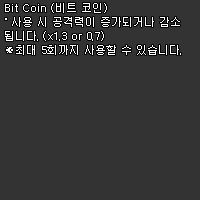
<style>
.page{position:relative;width:200px;height:200px;background:#333333}
.page>*{position:absolute;margin:0}
.t1{font:11px/14px "Dotum";color:#ffffff}
</style>
<div class="page">
<p class="t1" style="left:5px;top:3px;width:176px;height:52px">Bit Coin (비트 코인)<br>˚ 사용 시 공격력이 증가되거나 감소<br>됩니다. (x1.3 or 0.7)<br>※최대 5회까지 사용할 수 있습니다.</p>
</div>
